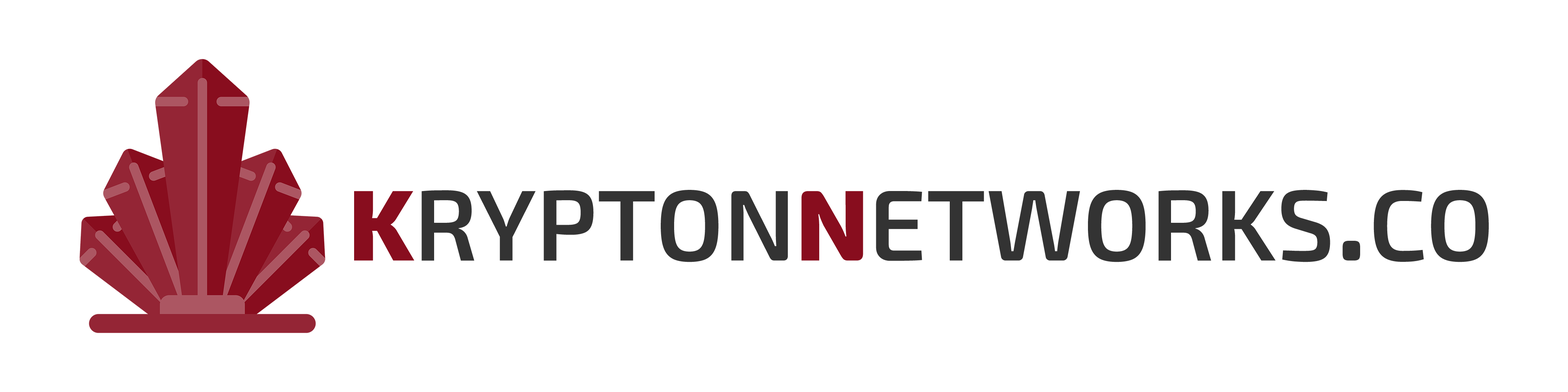
<style>
.page{position:relative;width:1568px;height:392px;background:#ffffff}
.page>*{position:absolute;margin:0}
.t1{font:143.6px "Exo2-SemiBold";color:#333333;font-variant:small-caps}
.t2{font:143.6px "Exo2-ExtraBold";color:#880d1e;font-variant:small-caps}
</style>
<div class="page">
<p class="t1" style="left:354px;top:190px;width:1135px;height:72px"><span class="t2">k</span>rypton<span class="t2">n</span>etworks.co</p>
</div>
